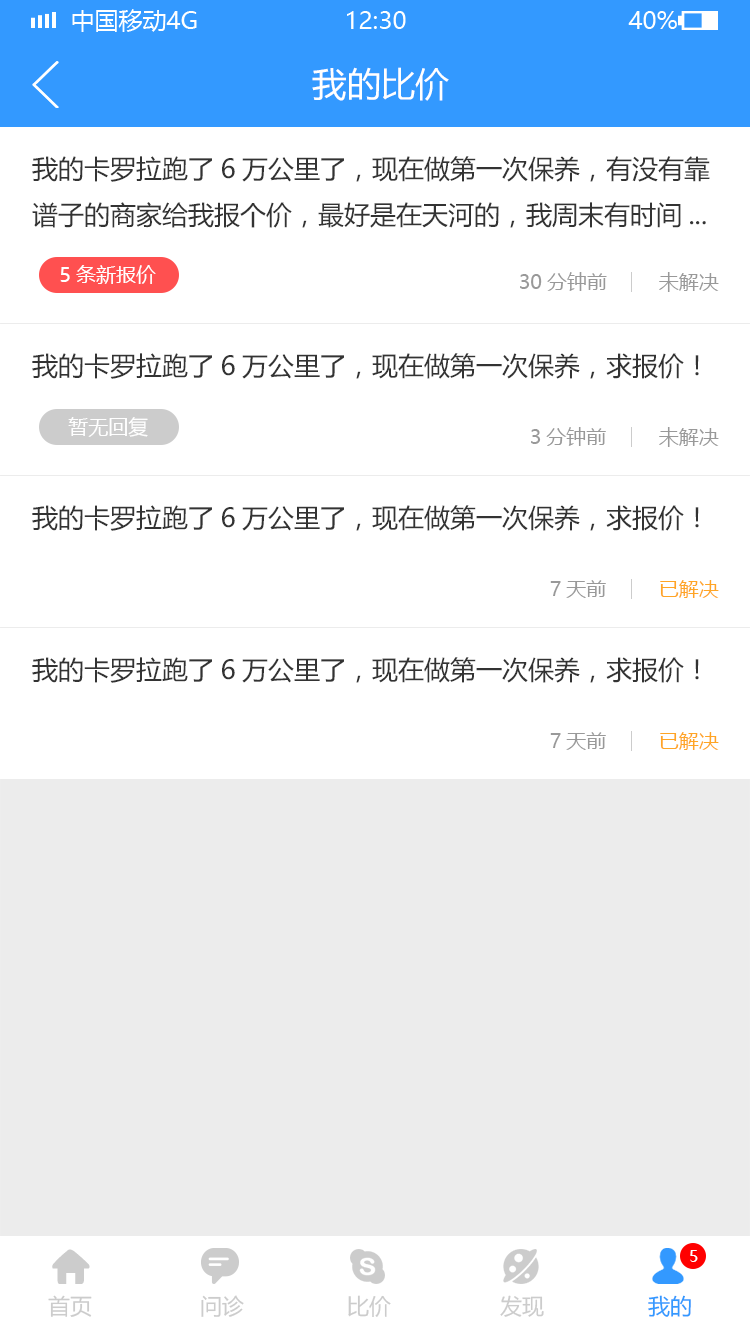
<style>
.page{position:relative;width:750px;height:1334px;background:#ffffff}
.page>*{position:absolute;margin:0}
.t1{font:34px "MicrosoftYaHei";color:#ffffff}
.t2{font:26px "MicrosoftYaHei";color:#333333}
.t3{font:20px "MicrosoftYaHei";color:#ffffff}
.t4{font:20px "MicrosoftYaHei";color:#999999}
.t5{font:20px "MicrosoftYaHei";color:#ffa525}
.t6{font:16px "MicrosoftYaHei";color:#ffffff}
.t7{font:22px "MicrosoftYaHei";color:#cccccc}
.t8{font:22px "MicrosoftYaHei";color:#3399ff}
</style>
<div class="page">
<p class="t1" style="left:312px;top:67px;width:137px;height:34px">我的比价</p>
<p class="t2" style="left:32px;top:156px;width:678px;height:72px">我的卡罗拉跑了6万公里了，现在做第一次保养，有没有靠<br>谱子的商家给我报个价，最好是在天河的，我周末有时间...</p>
<p class="t3" style="left:60px;top:265px;width:96px;height:19px">5条新报价</p>
<p class="t4" style="left:520px;top:272px;width:87px;height:19px">30分钟前</p>
<p class="t4" style="left:659px;top:272px;width:60px;height:20px">未解决</p>
<p class="t2" style="left:32px;top:353px;width:667px;height:26px">我的卡罗拉跑了6万公里了，现在做第一次保养，求报价！</p>
<p class="t3" style="left:68px;top:417px;width:80px;height:20px">暂无回复</p>
<p class="t4" style="left:531px;top:427px;width:75px;height:19px">3分钟前</p>
<p class="t4" style="left:659px;top:427px;width:60px;height:20px">未解决</p>
<p class="t2" style="left:32px;top:505px;width:667px;height:26px">我的卡罗拉跑了6万公里了，现在做第一次保养，求报价！</p>
<p class="t4" style="left:550px;top:580px;width:56px;height:18px">7天前</p>
<p class="t5" style="left:660px;top:580px;width:59px;height:18px">已解决</p>
<p class="t2" style="left:32px;top:657px;width:667px;height:26px">我的卡罗拉跑了6万公里了，现在做第一次保养，求报价！</p>
<p class="t4" style="left:550px;top:732px;width:56px;height:18px">7天前</p>
<p class="t5" style="left:660px;top:732px;width:59px;height:18px">已解决</p>
<p class="t6" style="left:690px;top:1250px;width:8px;height:12px">5</p>
<p class="t7" style="left:48px;top:1295px;width:44px;height:22px">首页</p>
<p class="t7" style="left:201px;top:1295px;width:43px;height:22px">问诊</p>
<p class="t7" style="left:348px;top:1295px;width:43px;height:22px">比价</p>
<p class="t7" style="left:500px;top:1295px;width:44px;height:22px">发现</p>
<p class="t8" style="left:648px;top:1295px;width:43px;height:22px">我的</p>
</div>
